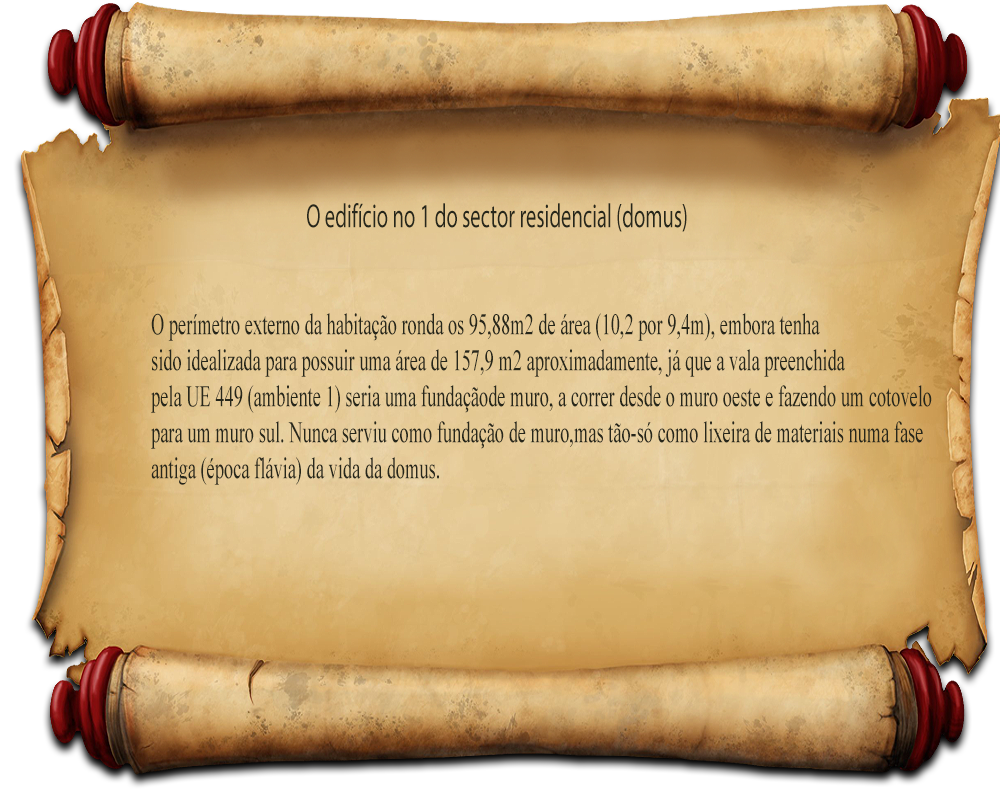
<style>
.page{position:relative;width:1000px;height:800px}
.page>*{position:absolute;margin:0}
.t1{font:30px "TimesNewRomanPSMT";color:#27271b;scale:0.61 1}
.t2{font:19.7px "MyriadPro-Regular";color:#27271b;scale:0.61 1}
.t3{font:33.8px "MyriadPro-Regular";color:#27271b;scale:0.61 1}
</style>
<div class="page">
<p class="t1" style="left:151px;top:203px;width:781px;height:282px"><span class="t2">     </span><span class="t3">O edifício no 1 do sector residencial (domus)<br><br><br><br></span>O perímetro externo da habitação ronda os 95,88m2 de área (10,2 por 9,4m), embora tenha <br>sido idealizada para possuir uma área de 157,9 m2 aproximadamente, já que a vala preenchida <br>pela UE 449 (ambiente 1) seria uma fundaçãode muro, a correr desde o muro oeste e fazendo um cotovelo <br>para um muro sul. Nunca serviu como fundação de muro,mas tão-só como lixeira de materiais numa fase <br>antiga (época flávia) da vida da domus.</p>
</div>
